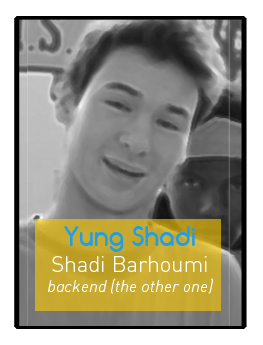
<style>
.page{position:relative;width:263px;height:345px}
.page>*{position:absolute;margin:0}
.t1{font:16.7px "DIN-LightItalicAlt";color:#ffffff}
.t2{font:25px "Comfortaa-Bold";color:#20a0ea}
.t3{font:22.2px "DIN-Light";color:#ffffff}
</style>
<div class="page">
<p class="t1" style="left:48px;top:226px;width:165px;height:68px;text-align:center"><span class="t2">Yung Shadi<br></span><span class="t3">Shadi Barhoumi<br></span>backend (the other one)</p>
</div>
